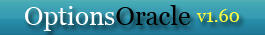
<style>
.page{position:relative;width:265px;height:35px}
.page>*{position:absolute;margin:0}
.t1{font:26px "Georgia";color:#ffffff}
.t2{font:26px "Georgia";color:#000000}
.t3{font:18px "Georgia";color:#fdff3b}
</style>
<div class="page">
<p class="t1" style="left:25px;top:5px;width:165px;height:26px">Options<span class="t2">Oracle</span></p>
<p class="t3" style="left:196px;top:9px;width:43px;height:13px">v1.60</p>
</div>
